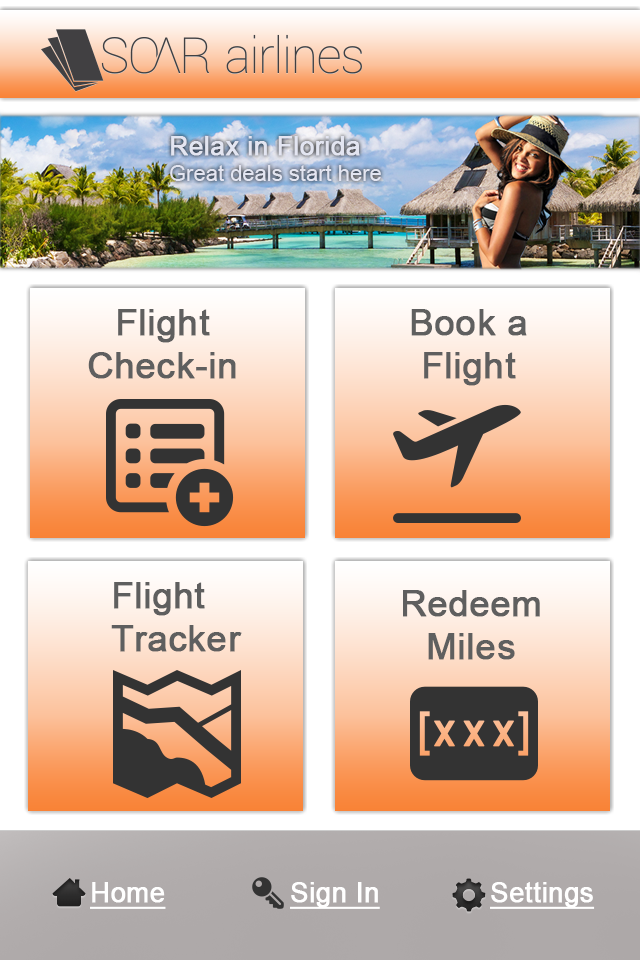
<style>
.page{position:relative;width:640px;height:960px}
.page>*{position:absolute;margin:0}
.t1{font:22px "ArialMT";color:#e3e5f1}
.t2{font:26px "ArialMT";color:#e3e5f1;font-weight:bold}
.t3{font:36.2px "ArialMT";color:#5f5f5f;font-weight:bold}
.t4{font:27.2px "ArialMT";color:#ffffff;font-weight:bold;text-decoration:underline}
</style>
<div class="page">
<p class="t1" style="left:170px;top:136px;width:211px;height:45px"><span class="t2">Relax in Florida<br></span>Great deals start here</p>
<p class="t3" style="left:88px;top:309px;width:148px;height:70px;text-align:center">Flight<br>Check-in</p>
<p class="t3" style="left:411px;top:309px;width:116px;height:77px;text-align:center">Book a<br>Flight</p>
<p class="t3" style="left:111px;top:582px;width:131px;height:70px">Flight<br>Tracker</p>
<p class="t3" style="left:403px;top:590px;width:137px;height:70px;text-align:center">Redeem<br>Miles</p>
<p class="t4" style="left:90px;top:882px;width:76px;height:27px">Home</p>
<p class="t4" style="left:290px;top:882px;width:90px;height:27px">Sign In</p>
<p class="t4" style="left:490px;top:882px;width:105px;height:27px">Settings</p>
</div>
